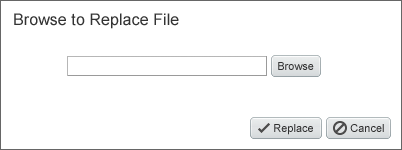
<style>
.page{position:relative;width:402px;height:150px;background:#ffffff}
.page>*{position:absolute;margin:0}
.t1{font:16px "ArialMT";letter-spacing:0.005em;color:#333333}
.t2{font:11px "ArialMT";color:#303030}
</style>
<div class="page">
<p class="t1" style="left:14px;top:13px;width:165px;height:16px">Browse to Replace File</p>
<p class="t2" style="left:278px;top:62px;width:36px;height:8px">Browse</p>
<p class="t2" style="left:274px;top:124px;width:39px;height:11px">Replace</p>
<p class="t2" style="left:350px;top:124px;width:34px;height:8px">Cancel</p>
</div>
